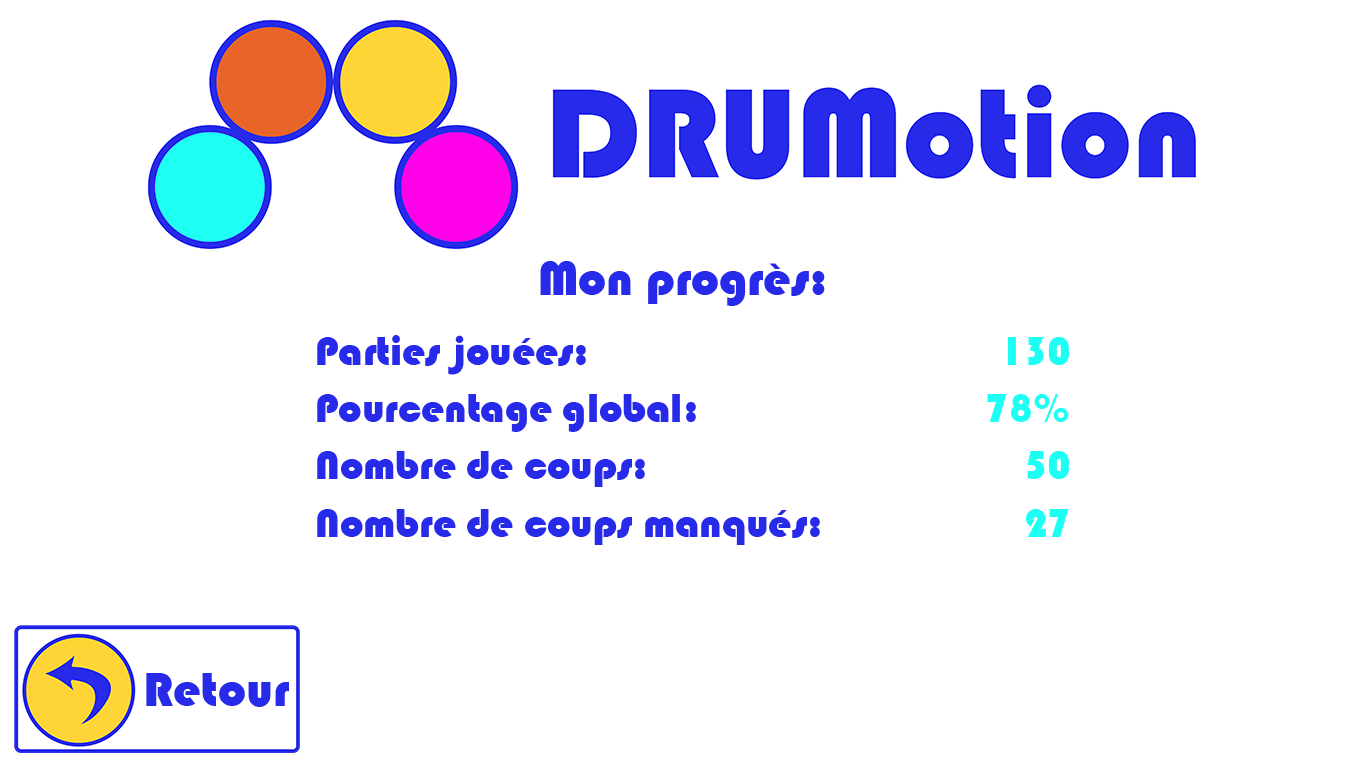
<style>
.page{position:relative;width:1366px;height:768px;background:#ffffff}
.page>*{position:absolute;margin:0}
.t1{font:50px "Bauhaus93";color:#272ae8}
.t2{font:41.7px "Bauhaus93";color:#272ae8}
.t3{font:41.7px "Bauhaus93";color:#1efff3}
</style>
<div class="page">
<p class="t1" style="left:540px;top:261px;width:285px;height:45px">Mon progrès:</p>
<p class="t2" style="left:317px;top:335px;width:503px;height:210px">Parties jouées:      <br>Pourcentage global: <br>Nombre de coups: <br>Nombre de coups manqués:</p>
<p class="t3" style="left:987px;top:337px;width:82px;height:200px;text-align:right">130<br>78%<br>50<br>27</p>
<p class="t1" style="left:146px;top:673px;width:143px;height:34px">Retour</p>
</div>
